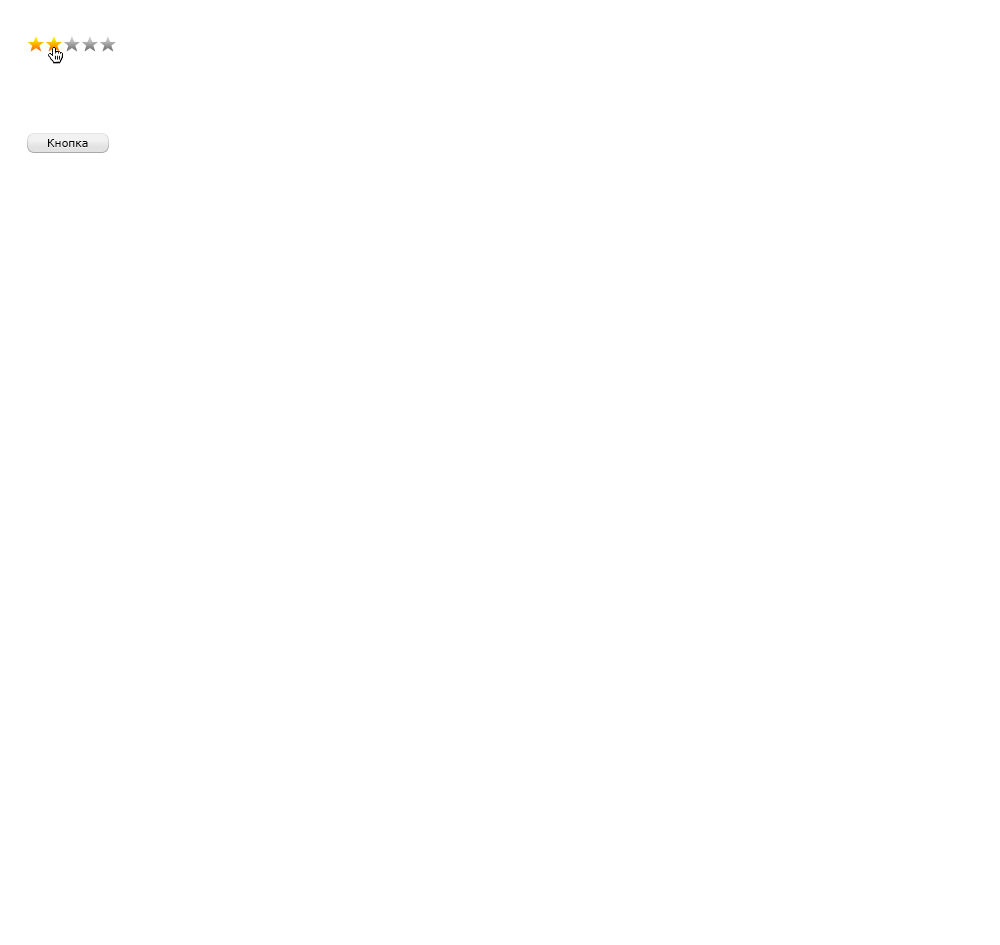
<style>
.page{position:relative;width:1000px;height:945px;background:#ffffff}
.page>*{position:absolute;margin:0}
.t1{font:11px "Verdana";color:#000000}
</style>
<div class="page">
<p class="t1" style="left:48px;top:139px;width:40px;height:8px">Кнопка</p>
</div>
